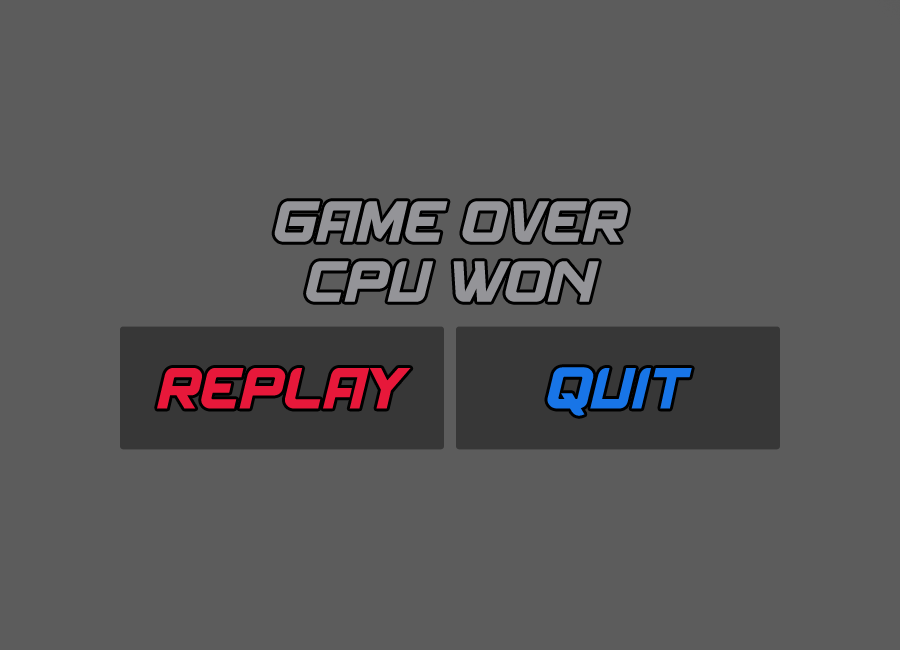
<style>
.page{position:relative;width:900px;height:650px;background:#5c5c5c}
.page>*{position:absolute;margin:0}
.t1{font:62px/60px "Spantarandemo";letter-spacing:0.02em;color:#949498}
.t2{font:62px "Spantarandemo";letter-spacing:0.02em;color:#e7183a}
.t3{font:62px "Spantarandemo";letter-spacing:0.02em;color:#1875e7}
</style>
<div class="page">
<p class="t1" style="left:274px;top:201px;width:354px;height:101px;text-align:center">GAME OVER<br>CPU WON</p>
<p class="t2" style="left:157px;top:368px;width:254px;height:41px">REPLAY</p>
<p class="t3" style="left:547px;top:367px;width:145px;height:49px">QUIT</p>
</div>
